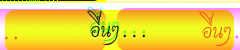
<style>
.page{position:relative;width:240px;height:50px}
.page>*{position:absolute;margin:0}
.t1{font:28px "THCharmonman"}
</style>
<div class="page">
<p class="t1" style="left:87px;top:6px;width:58px;height:35px">อื่นๆ...</p>
</div>
